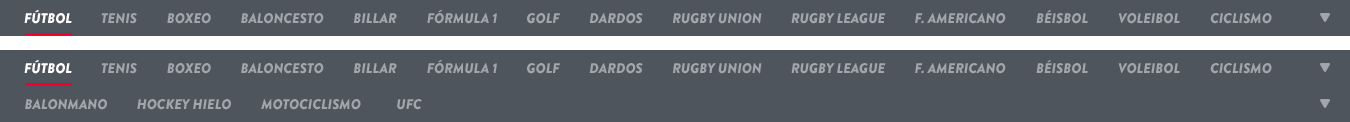
<style>
.page{position:relative;width:1350px;height:122px;background:#4e555d}
.page>*{position:absolute;margin:0}
.t1{font:14px "BrandonGrotesque-BlackItalic";color:#ffffff;text-transform:uppercase}
.t2{font:14px "BrandonGrotesque-BlackItalic";color:#a1a6ac;text-transform:uppercase}
</style>
<div class="page">
<p class="t1" style="left:24px;top:9px;width:48px;height:15px">Fútbol</p>
<p class="t2" style="left:101px;top:13px;width:36px;height:11px">Tenis</p>
<p class="t2" style="left:167px;top:13px;width:44px;height:11px">Boxeo</p>
<p class="t2" style="left:241px;top:13px;width:83px;height:11px">Baloncesto</p>
<p class="t2" style="left:354px;top:13px;width:43px;height:10px">Billar</p>
<p class="t2" style="left:427px;top:9px;width:70px;height:15px">Fórmula 1</p>
<p class="t2" style="left:527px;top:13px;width:33px;height:11px">Golf</p>
<p class="t2" style="left:589px;top:13px;width:54px;height:11px">Dardos</p>
<p class="t2" style="left:673px;top:13px;width:89px;height:11px">RUGBY UNION</p>
<p class="t2" style="left:791px;top:13px;width:95px;height:11px">RUGBY LEague</p>
<p class="t2" style="left:915px;top:13px;width:91px;height:11px">F. AmericaNO</p>
<p class="t2" style="left:1036px;top:10px;width:52px;height:14px">Béisbol</p>
<p class="t2" style="left:1118px;top:13px;width:62px;height:11px">VOLEIBOL</p>
<p class="t2" style="left:1210px;top:13px;width:62px;height:11px">ciclismo</p>
<p class="t1" style="left:24px;top:59px;width:48px;height:15px">Fútbol</p>
<p class="t2" style="left:101px;top:63px;width:36px;height:11px">Tenis</p>
<p class="t2" style="left:167px;top:63px;width:44px;height:11px">Boxeo</p>
<p class="t2" style="left:241px;top:63px;width:83px;height:11px">Baloncesto</p>
<p class="t2" style="left:354px;top:63px;width:43px;height:10px">Billar</p>
<p class="t2" style="left:427px;top:59px;width:70px;height:15px">Fórmula 1</p>
<p class="t2" style="left:527px;top:63px;width:33px;height:11px">Golf</p>
<p class="t2" style="left:589px;top:63px;width:54px;height:11px">Dardos</p>
<p class="t2" style="left:673px;top:63px;width:89px;height:11px">RUGBY UNION</p>
<p class="t2" style="left:791px;top:63px;width:95px;height:11px">RUGBY LEague</p>
<p class="t2" style="left:915px;top:63px;width:91px;height:11px">F. AmericaNO</p>
<p class="t2" style="left:1036px;top:60px;width:52px;height:14px">Béisbol</p>
<p class="t2" style="left:1118px;top:63px;width:62px;height:11px">VOLEIBOL</p>
<p class="t2" style="left:1210px;top:63px;width:62px;height:11px">ciclismo</p>
<p class="t2" style="left:25px;top:99px;width:82px;height:11px">Balonmano</p>
<p class="t2" style="left:137px;top:99px;width:94px;height:11px">Hockey Hielo</p>
<p class="t2" style="left:261px;top:99px;width:100px;height:11px">Motociclismo</p>
<p class="t2" style="left:397px;top:99px;width:25px;height:11px">UFC</p>
</div>
